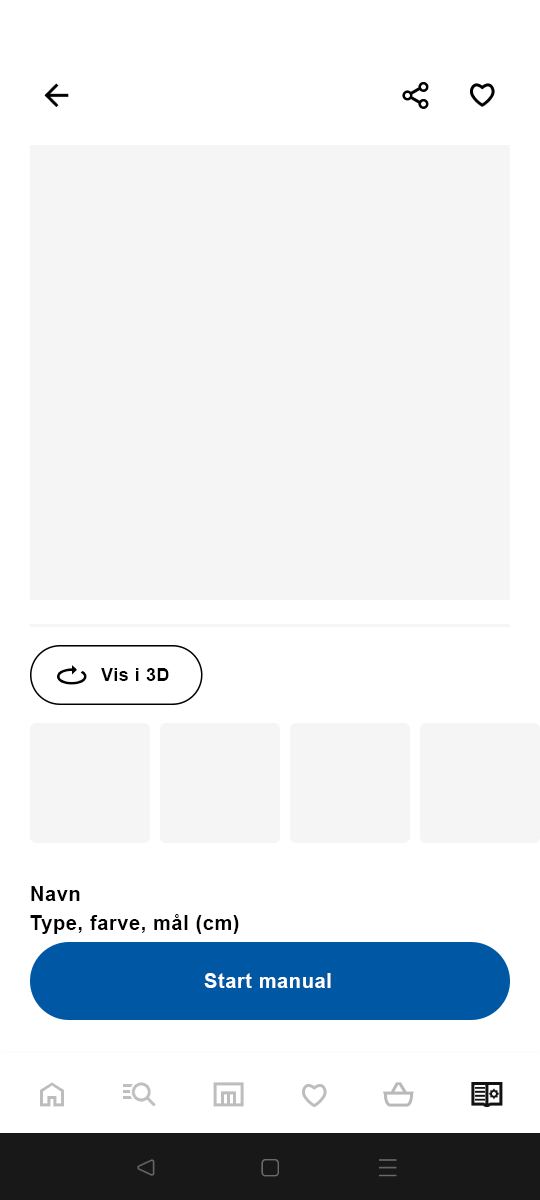
<style>
.page{position:relative;width:540px;height:1200px;background:#ffffff}
.page>*{position:absolute;margin:0}
.t1{font:18px "Arial-BoldMT";letter-spacing:0.03em;color:#000000}
.t2{font:20px "Arial-BoldMT";letter-spacing:0.03em;color:#000000}
.t3{font:20px "Arial-BoldMT";letter-spacing:0.03em;color:#ffffff}
</style>
<div class="page">
<p class="t1" style="left:101px;top:668px;width:68px;height:13px">Vis i 3D</p>
<p class="t2" style="left:31px;top:886px;width:49px;height:15px">Navn</p>
<p class="t2" style="left:30px;top:914px;width:209px;height:20px">Type, farve, mål (cm)</p>
<p class="t3" style="left:204px;top:973px;width:127px;height:15px">Start manual</p>
</div>
